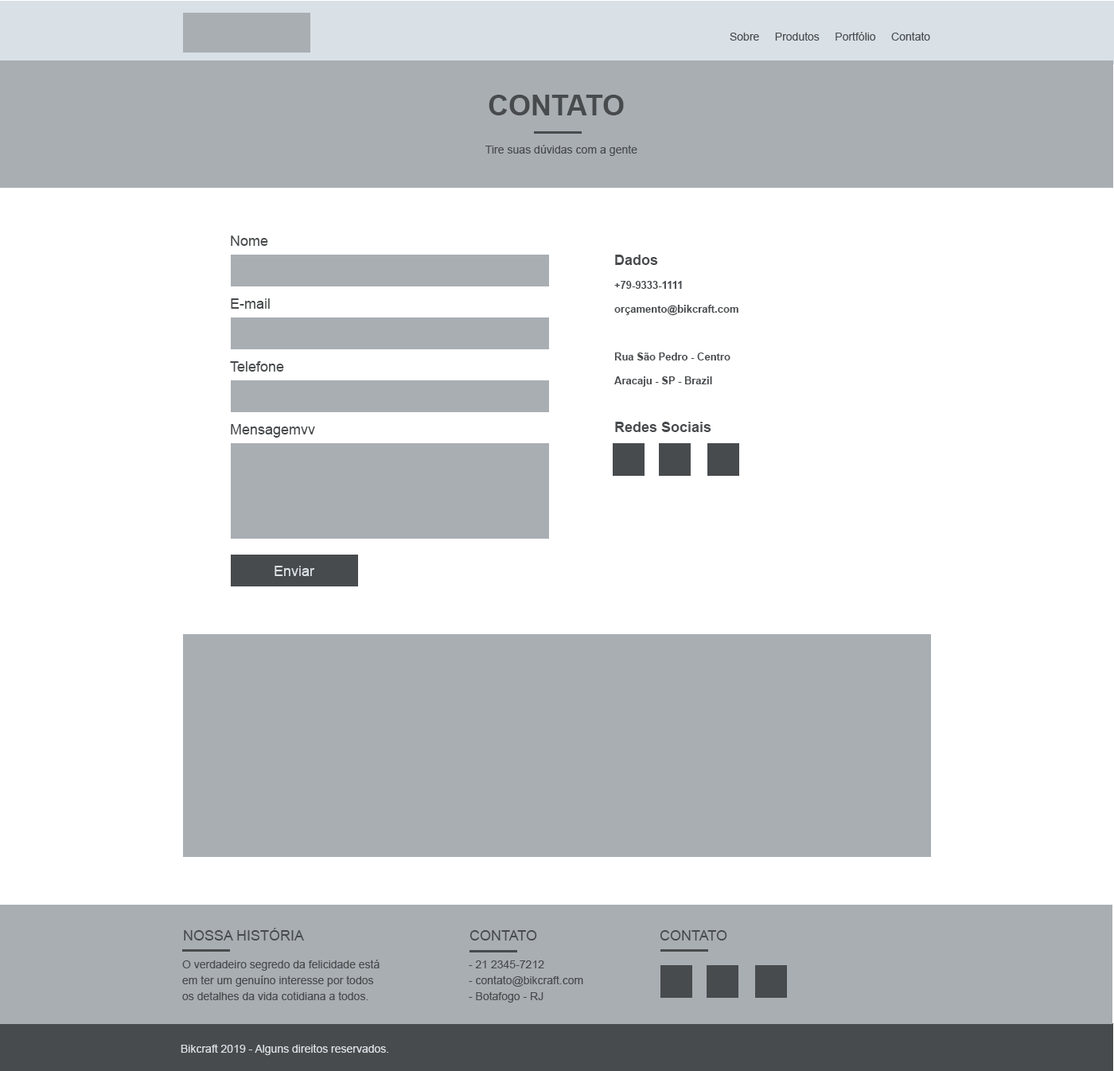
<style>
.page{position:relative;width:1114px;height:1071px;background:#ffffff}
.page>*{position:absolute;margin:0}
.t1{font:11.1px "ArialMT";color:#484b4d}
.t2{font:28.6px "Arial-BoldMT";color:#484b4d;text-transform:uppercase}
.t3{font:11.2px "ArialMT";color:#484b4d}
.t4{font:14.3px "ArialMT";color:#484b4d}
.t5{font:10.3px/23.9px "Arial-BoldMT";color:#484b4d}
.t6{font:14.3px/23.9px "Arial-BoldMT";color:#484b4d}
.t7{font:14.3px "ArialMT";color:#d9e0e6}
.t8{font:14.3px "ArialMT";color:#484b4d;text-transform:uppercase}
.t9{font:11.1px/15.9px "ArialMT";color:#484b4d}
.t10{font:11.1px "ArialMT";color:#d9e0e6}
</style>
<div class="page">
<p class="t1" style="left:729px;top:32px;width:201px;height:9px">Sobre     Produtos     Portfólio     Contato</p>
<p class="t2" style="left:488px;top:95px;width:136px;height:20px">Contato</p>
<p class="t3" style="left:484px;top:145px;width:153px;height:11px">Tire suas dúvidas com a gente</p>
<p class="t4" style="left:231px;top:235px;width:37px;height:11px">Nome</p>
<p class="t5" style="left:614px;top:255px;width:124px;height:177px"><span class="t6">Dados <br></span>+79-9333-1111<br>orçamento@bikcraft.com<br><br>Rua São Pedro - Centro<br>Aracaju - SP - Brazil<br><br><span class="t6">Redes Sociais</span></p>
<p class="t4" style="left:231px;top:298px;width:39px;height:11px">E-mail</p>
<p class="t4" style="left:230px;top:361px;width:54px;height:10px">Telefone</p>
<p class="t4" style="left:231px;top:424px;width:84px;height:14px">Mensagemvv</p>
<p class="t7" style="left:274px;top:566px;width:41px;height:10px">Enviar</p>
<p class="t8" style="left:184px;top:928px;width:120px;height:12px">Nossa História</p>
<p class="t8" style="left:469px;top:930px;width:68px;height:10px">Contato</p>
<p class="t8" style="left:659px;top:930px;width:68px;height:10px">Contato</p>
<p class="t9" style="left:182px;top:959px;width:197px;height:41px">O verdadeiro segredo da felicidade está <br>em ter um genuíno interesse por todos<br>os detalhes da vida cotidiana a todos.</p>
<p class="t9" style="left:469px;top:960px;width:114px;height:42px">- 21 2345-7212<br>- contato@bikcraft.com<br>- Botafogo - RJ</p>
<p class="t10" style="left:181px;top:1044px;width:207px;height:11px">Bikcraft 2019 - Alguns direitos reservados.</p>
</div>
